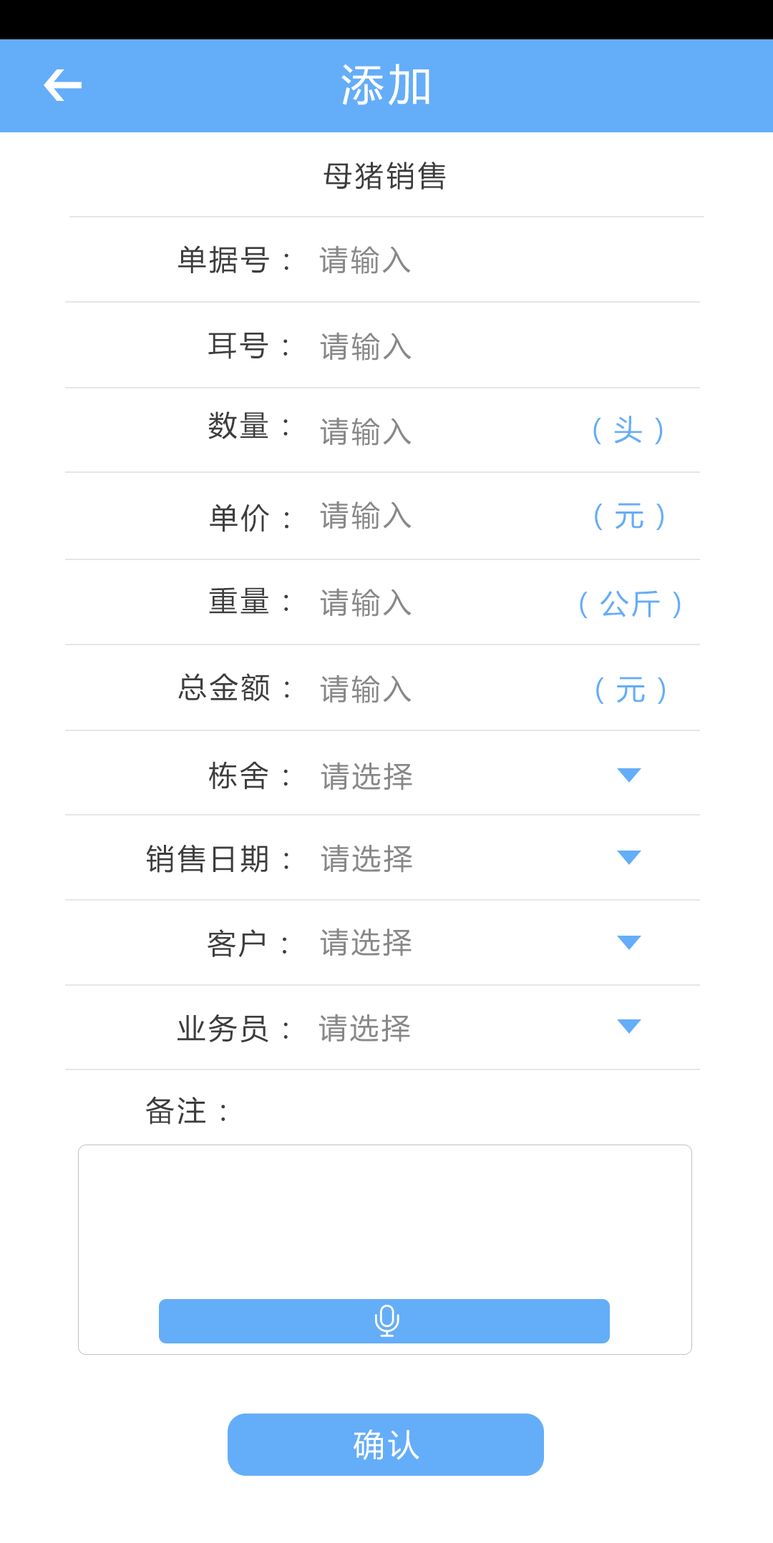
<style>
.page{position:relative;width:773px;height:1543px;background:#ffffff}
.page>*{position:absolute;margin:0}
.t1{font:42.9px "MicrosoftYaHei";letter-spacing:0.1em;color:#ffffff}
.t2{font:28.6px "MicrosoftYaHei";letter-spacing:0.1em;color:#3d3d3d}
.t3{font:28.6px "MicrosoftYaHei";letter-spacing:0.1em;color:#898888}
.t4{font:28.6px "MicrosoftYaHei";letter-spacing:0.1em;color:#64adf9}
.t5{font:31.5px "MicrosoftYaHei";letter-spacing:0.1em;color:#ffffff}
</style>
<div class="page">
<p class="t1" style="left:341px;top:64px;width:88px;height:42px">添加</p>
<p class="t2" style="left:323px;top:161px;width:123px;height:29px">母猪销售</p>
<p class="t2" style="left:178px;top:245px;width:110px;height:28px">单据号：</p>
<p class="t3" style="left:319px;top:245px;width:92px;height:29px">请输入</p>
<p class="t2" style="left:208px;top:333px;width:80px;height:26px">耳号：</p>
<p class="t3" style="left:320px;top:332px;width:91px;height:29px">请输入</p>
<p class="t2" style="left:208px;top:411px;width:80px;height:28px">数量：</p>
<p class="t3" style="left:320px;top:417px;width:91px;height:29px">请输入</p>
<p class="t4" style="left:593px;top:416px;width:70px;height:28px">（头）</p>
<p class="t2" style="left:210px;top:504px;width:78px;height:28px">单价：</p>
<p class="t3" style="left:320px;top:501px;width:91px;height:28px">请输入</p>
<p class="t4" style="left:595px;top:503px;width:68px;height:27px">（元）</p>
<p class="t2" style="left:209px;top:587px;width:79px;height:27px">重量：</p>
<p class="t3" style="left:320px;top:588px;width:91px;height:29px">请输入</p>
<p class="t4" style="left:580px;top:590px;width:100px;height:29px">（公斤）</p>
<p class="t2" style="left:178px;top:673px;width:111px;height:29px">总金额：</p>
<p class="t3" style="left:320px;top:675px;width:91px;height:28px">请输入</p>
<p class="t4" style="left:596px;top:677px;width:69px;height:27px">（元）</p>
<p class="t2" style="left:209px;top:761px;width:79px;height:29px">栋舍：</p>
<p class="t3" style="left:321px;top:762px;width:91px;height:29px">请选择</p>
<p class="t2" style="left:146px;top:844px;width:142px;height:29px">销售日期：</p>
<p class="t3" style="left:321px;top:844px;width:91px;height:29px">请选择</p>
<p class="t2" style="left:207px;top:929px;width:79px;height:28px">客户：</p>
<p class="t3" style="left:320px;top:928px;width:91px;height:29px">请选择</p>
<p class="t2" style="left:177px;top:1014px;width:111px;height:29px">业务员：</p>
<p class="t3" style="left:318px;top:1014px;width:92px;height:28px">请选择</p>
<p class="t2" style="left:145px;top:1096px;width:80px;height:29px">备注：</p>
<p class="t5" style="left:353px;top:1429px;width:66px;height:31px">确认</p>
</div>
